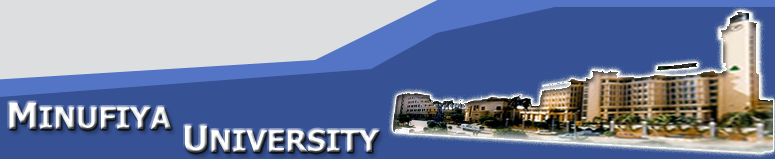
<style>
.page{position:relative;width:775px;height:159px;background:#375294}
.page>*{position:absolute;margin:0}
.t1{font:30px "MonotypeKoufi-Bold";text-transform:uppercase}
.t2{font:36px "MonotypeKoufi-Bold";text-transform:uppercase}
</style>
<div class="page">
<p class="t1" style="left:9px;top:102px;width:162px;height:28px"><span class="t2">M</span>inufiya</p>
<p class="t1" style="left:185px;top:125px;width:195px;height:28px"><span class="t2">u</span>niversity</p>
</div>
